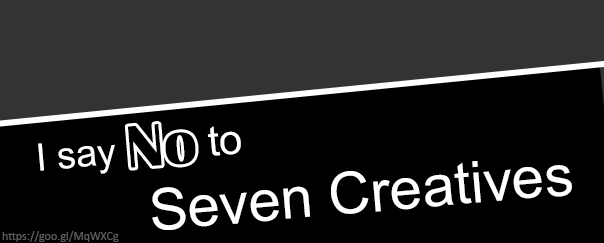
<style>
.page{position:relative;width:604px;height:243px;background:#000000}
.page>*{position:absolute;margin:0}
.t1{font:58px "ArialMT";color:#ffffff}
.t2{font:38px "ArialMT";color:#ffffff}
.t3{font:42px "ArialMT";color:#ffffff}
.t4{font:62px "BritannicBold";color:#000000}
.t5{font:12px "Calibri";color:#5b5b5b}
</style>
<div class="page">
<p class="t1" style="left:38px;top:126px;width:534px;height:104px;rotate:-5deg"><span class="t2">I say </span><span class="t3">       to <br>   </span>Seven Creatives</p>
<p class="t4" style="left:127px;top:124px;width:69px;height:44px;rotate:-5deg">No</p>
<p class="t5" style="left:2px;top:231px;width:117px;height:11px">https://goo.gl/MqWXCg</p>
</div>
